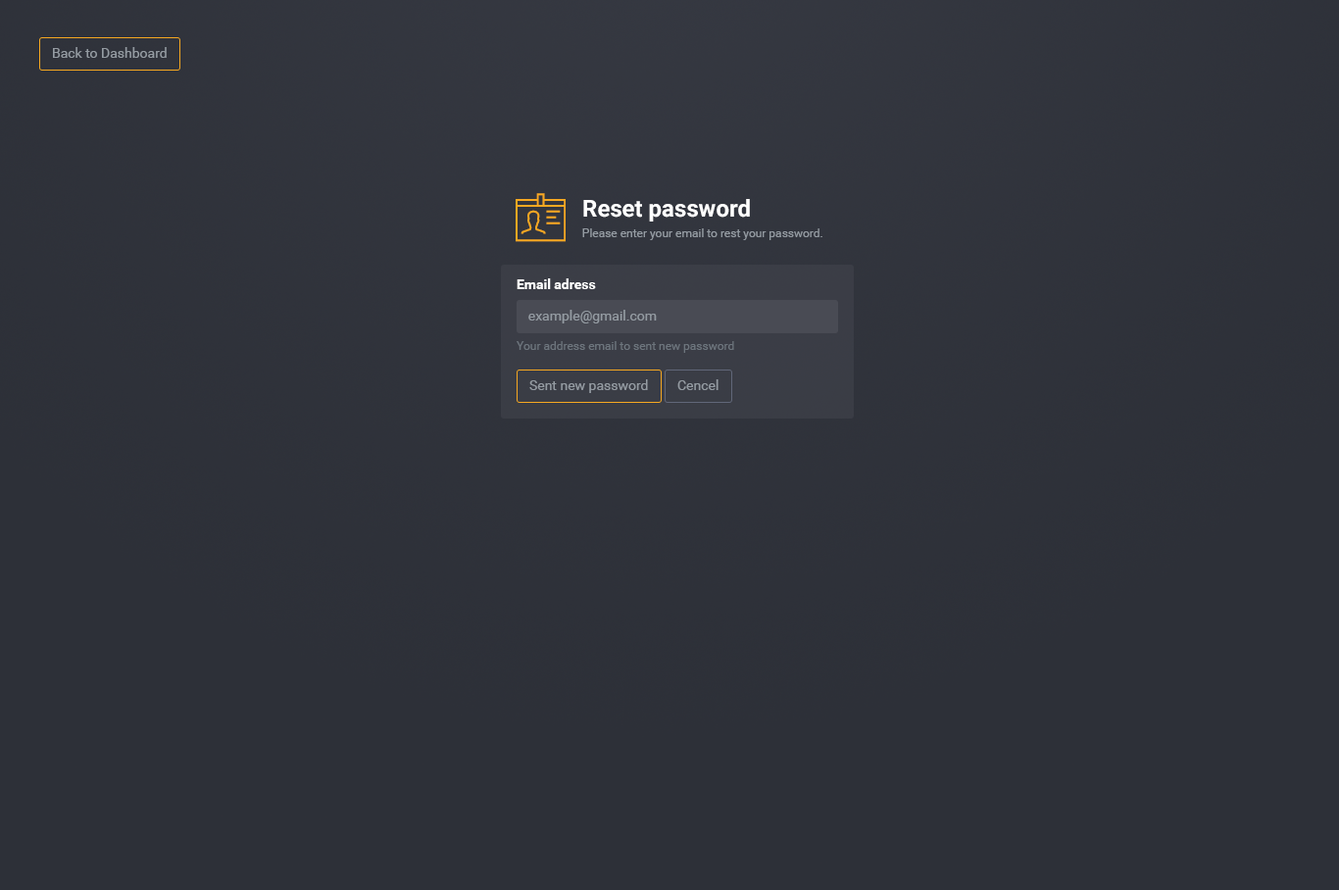
<style>
.page{position:relative;width:1339px;height:890px;background:#2d3038}
.page>*{position:absolute;margin:0}
.t1{font:13.7px "Roboto-Regular";color:#949ba2}
.t2{font:23.5px "Roboto-Bold";color:#ffffff}
.t3{font:11.8px "Roboto-Regular";color:#949ba2}
.t4{font:13.7px "Roboto-Bold";color:#ffffff}
.t5{font:11.8px "Roboto-Regular";color:#6d757d}
</style>
<div class="page">
<p class="t1" style="left:53px;top:47px;width:114px;height:11px">Back to Dashboard</p>
<p class="t2" style="left:583px;top:199px;width:167px;height:23px">Reset password</p>
<p class="t3" style="left:582px;top:228px;width:241px;height:12px">Please enter your email to rest your password.</p>
<p class="t4" style="left:517px;top:278px;width:79px;height:11px">Email adress</p>
<p class="t1" style="left:528px;top:310px;width:129px;height:14px">example@gmail.com</p>
<p class="t5" style="left:517px;top:341px;width:217px;height:12px">Your address email to sent new password</p>
<p class="t1" style="left:529px;top:379px;width:119px;height:14px">Sent new password</p>
<p class="t1" style="left:678px;top:379px;width:41px;height:11px">Cencel</p>
</div>
